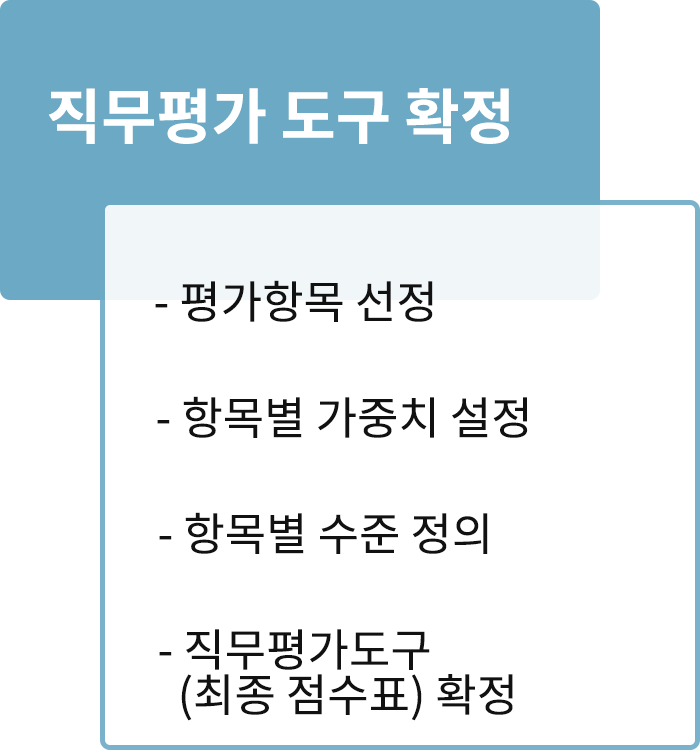
<style>
.page{position:relative;width:700px;height:750px;background:#ffffff}
.page>*{position:absolute;margin:0}
.t1{font:60px "NotoSansCJKkr-Bold";color:#ffffff}
.t2{font:45px "NotoSansCJKkr-Regular";color:#111111}
.t3{font:45px/45px "NotoSansCJKkr-Regular";color:#111111}
</style>
<div class="page">
<p class="t1" style="left:48px;top:88px;width:461px;height:56px">직무평가 도구 확정</p>
<p class="t2" style="left:155px;top:280px;width:278px;height:42px">- 평가항목 선정</p>
<p class="t2" style="left:157px;top:396px;width:371px;height:42px">- 항목별 가중치 설정</p>
<p class="t2" style="left:159px;top:512px;width:329px;height:42px">- 항목별 수준 정의</p>
<p class="t3" style="left:159px;top:629px;width:354px;height:92px">- 직무평가도구<br>  (최종 점수표) 확정</p>
</div>
